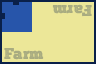
<style>
.page{position:relative;width:96px;height:64px;background:#ece798}
.page>*{position:absolute;margin:0}
.t1{font:16px "ChunkFivePrint";color:#a8ab80}
</style>
<div class="page">
<p class="t1" style="left:52px;top:4px;width:40px;height:13px;rotate:180deg">Farm</p>
<p class="t1" style="left:4px;top:47px;width:40px;height:13px">Farm</p>
</div>
